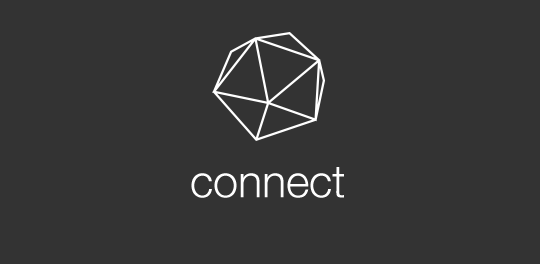
<style>
.page{position:relative;width:540px;height:264px;background:#333333}
.page>*{position:absolute;margin:0}
.t1{font:45px "HelveticaNeue-Light";color:#ffffff}
</style>
<div class="page">
<p class="t1" style="left:191px;top:167px;width:153px;height:31px">connect</p>
</div>
